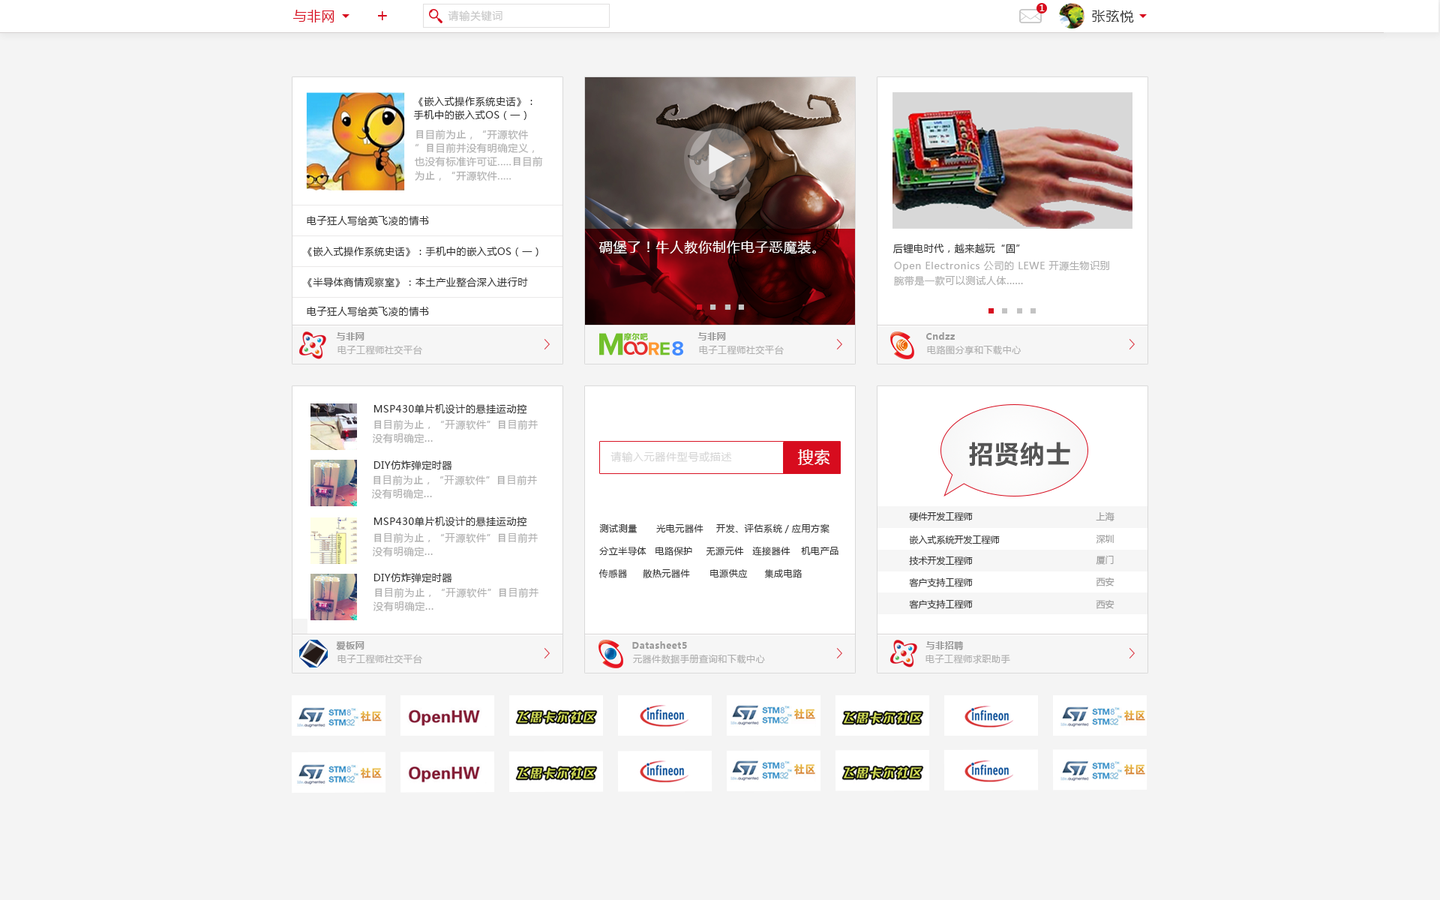
<style>
.page{position:relative;width:1440px;height:900px;background:#f4f4f4}
.page>*{position:absolute;margin:0}
.t1{font:9px "MicrosoftYaHei";letter-spacing:0.05em;color:#ffffff}
.t2{font:13.5px "MicrosoftYaHei";letter-spacing:0.05em;color:#d70c1e}
.t3{font:18.9px "MicrosoftYaHei";letter-spacing:0.05em;color:#d70c1e;scale:0.95 1}
.t4{font:10.5px "MicrosoftYaHei";letter-spacing:0.05em;color:#c7c7c7}
.t5{font:13.5px "MicrosoftYaHei";letter-spacing:0.05em;color:#333333}
.t6{font:9.8px/13.5px "MicrosoftYaHei";letter-spacing:0.05em;color:#333333}
.t7{font:9.8px/13.5px "MicrosoftYaHei";letter-spacing:0.05em;color:#9b9b9b}
.t8{font:9.8px/13.5px "AdobeHeitiStd-Regular";letter-spacing:0.05em;color:#9b9b9b}
.t9{font:9.8px "MicrosoftYaHei";letter-spacing:0.05em;color:#333333}
.t10{font:13.5px "MicrosoftYaHei";letter-spacing:0.05em;color:#ffffff}
.t11{font:9.8px/15px "MicrosoftYaHei";letter-spacing:0.05em;color:#9b9b9b}
.t12{font:9px "MicrosoftYaHei-Bold";letter-spacing:0.05em;color:#999999}
.t13{font:9px "MicrosoftYaHei";letter-spacing:0.05em;color:#999999}
.t14{font:15.8px "MicrosoftYaHei";letter-spacing:0.05em;color:#ffffff}
.t15{font:24.7px "MicrosoftYaHei-Bold";letter-spacing:0.05em;color:#555555}
.t16{font:10.5px "MicrosoftYaHei";letter-spacing:0.05em;color:#d6d6d6}
.t17{font:9px "MicrosoftYaHei";color:#333333}
.t18{font:9px "MicrosoftYaHei";color:#9b9b9b}
.t19{font:9px "MicrosoftYaHei";letter-spacing:0.05em;color:#333333}
</style>
<div class="page">
<p class="t1" style="left:1040px;top:4px;width:5px;height:7px">1</p>
<p class="t2" style="left:292px;top:10px;width:42px;height:12px">与非网</p>
<p class="t3" style="left:378px;top:11px;width:9px;height:9px">+</p>
<p class="t4" style="left:448px;top:10px;width:54px;height:12px">请输关键词</p>
<p class="t5" style="left:1092px;top:10px;width:42px;height:12px">张弦悦</p>
<p class="t6" style="left:413px;top:97px;width:119px;height:23px">《嵌入式操作系统史话》：<br>手机中的嵌入式OS（一）</p>
<p class="t7" style="left:414px;top:130px;width:129px;height:51px"><span class="t8">⽬</span>目前为<span class="t8">⽌</span>，“开源软件”<span class="t8">⽬</span>目前并没有明确定义，也没有标准许可证.....<span class="t8">⽬</span>目前为<span class="t8">⽌</span>，“开源软件.....</p>
<p class="t9" style="left:307px;top:215px;width:122px;height:11px">电子狂人写给英飞凌的情书</p>
<p class="t10" style="left:598px;top:240px;width:218px;height:14px">碉堡了！牛人教你制作电子恶魔装。</p>
<p class="t9" style="left:892px;top:243px;width:128px;height:11px">后锂电时代，越来越玩“固”</p>
<p class="t9" style="left:308px;top:247px;width:230px;height:9px">《嵌入式操作系统史话》：手机中的嵌入式OS（一）</p>
<p class="t11" style="left:894px;top:261px;width:215px;height:25px">Open Electronics 公司的 LEWE 开源生物识别腕带是一款可以测试人体......</p>
<p class="t9" style="left:308px;top:277px;width:220px;height:10px">《半导体商情观察室》：本土产业整合深入进行时</p>
<p class="t9" style="left:307px;top:306px;width:122px;height:10px">电子狂人写给英飞凌的情书</p>
<p class="t12" style="left:336px;top:332px;width:28px;height:8px">与非网</p>
<p class="t12" style="left:698px;top:332px;width:28px;height:8px">与非网</p>
<p class="t12" style="left:926px;top:332px;width:29px;height:8px">Cndzz</p>
<p class="t13" style="left:338px;top:345px;width:84px;height:10px">电子工程师社交平台</p>
<p class="t13" style="left:699px;top:345px;width:85px;height:10px">电子工程师社交平台</p>
<p class="t13" style="left:927px;top:345px;width:94px;height:10px">电路图分享和下载中心</p>
<p class="t9" style="left:374px;top:404px;width:153px;height:10px">MSP430单片机设计的悬挂运动控</p>
<p class="t7" style="left:373px;top:420px;width:165px;height:23px"><span class="t8">⽬</span>目前为<span class="t8">⽌</span>，“开源软件”<span class="t8">⽬</span>目前并没有明确定...<br>义，也没有标准许可证.....</p>
<p class="t14" style="left:798px;top:449px;width:32px;height:16px">搜索</p>
<p class="t15" style="left:969px;top:442px;width:101px;height:24px">招贤纳士</p>
<p class="t9" style="left:374px;top:460px;width:78px;height:10px">DIY仿炸弹定时器</p>
<p class="t16" style="left:610px;top:452px;width:122px;height:11px">请输入元器件型号或描述</p>
<p class="t7" style="left:372px;top:476px;width:165px;height:23px"><span class="t8">⽬</span>目前为<span class="t8">⽌</span>，“开源软件”<span class="t8">⽬</span>目前并没有明确定...<br>义，也没有标准许可证.....</p>
<p class="t9" style="left:374px;top:516px;width:153px;height:10px">MSP430单片机设计的悬挂运动控</p>
<p class="t17" style="left:909px;top:512px;width:64px;height:9px">硬件开发工程师</p>
<p class="t18" style="left:1096px;top:512px;width:18px;height:9px">上海</p>
<p class="t7" style="left:373px;top:533px;width:165px;height:23px"><span class="t8">⽬</span>目前为<span class="t8">⽌</span>，“开源软件”<span class="t8">⽬</span>目前并没有明确定...<br>义，也没有标准许可证.....</p>
<p class="t19" style="left:599px;top:524px;width:39px;height:9px">测试测量</p>
<p class="t19" style="left:656px;top:524px;width:48px;height:9px">光电元器件</p>
<p class="t19" style="left:716px;top:524px;width:114px;height:9px">开发、评估系统／应用方案</p>
<p class="t17" style="left:909px;top:535px;width:91px;height:9px">嵌入式系统开发工程师</p>
<p class="t18" style="left:1096px;top:535px;width:18px;height:9px">深圳</p>
<p class="t19" style="left:599px;top:547px;width:47px;height:9px">分立半导体</p>
<p class="t19" style="left:656px;top:547px;width:36px;height:9px">电路保护</p>
<p class="t19" style="left:706px;top:547px;width:38px;height:9px">无源元件</p>
<p class="t19" style="left:752px;top:546px;width:38px;height:10px">连接器件</p>
<p class="t19" style="left:801px;top:547px;width:37px;height:8px">机电产品</p>
<p class="t17" style="left:909px;top:556px;width:64px;height:10px">技术开发工程师</p>
<p class="t18" style="left:1096px;top:556px;width:18px;height:9px">厦门</p>
<p class="t19" style="left:598px;top:568px;width:29px;height:10px">传感器</p>
<p class="t19" style="left:643px;top:568px;width:47px;height:10px">散热元器件</p>
<p class="t19" style="left:710px;top:569px;width:38px;height:9px">电源供应</p>
<p class="t19" style="left:764px;top:568px;width:38px;height:10px">集成电路</p>
<p class="t9" style="left:374px;top:573px;width:78px;height:10px">DIY仿炸弹定时器</p>
<p class="t17" style="left:909px;top:578px;width:64px;height:9px">客户支持工程师</p>
<p class="t18" style="left:1096px;top:578px;width:18px;height:8px">西安</p>
<p class="t7" style="left:374px;top:588px;width:164px;height:23px"><span class="t8">⽬</span>目前为<span class="t8">⽌</span>，“开源软件”<span class="t8">⽬</span>目前并没有明确定...<br>义，也没有标准许可证.....</p>
<p class="t17" style="left:909px;top:599px;width:64px;height:10px">客户支持工程师</p>
<p class="t18" style="left:1096px;top:600px;width:18px;height:9px">西安</p>
<p class="t12" style="left:336px;top:641px;width:28px;height:9px">爱板网</p>
<p class="t12" style="left:632px;top:641px;width:55px;height:8px">Datasheet5</p>
<p class="t12" style="left:926px;top:640px;width:37px;height:10px">与非招聘</p>
<p class="t13" style="left:338px;top:654px;width:84px;height:10px">电子工程师社交平台</p>
<p class="t13" style="left:633px;top:654px;width:132px;height:10px">元器件数据手册查询和下载中心</p>
<p class="t13" style="left:926px;top:654px;width:84px;height:10px">电子工程师求职助手</p>
</div>
